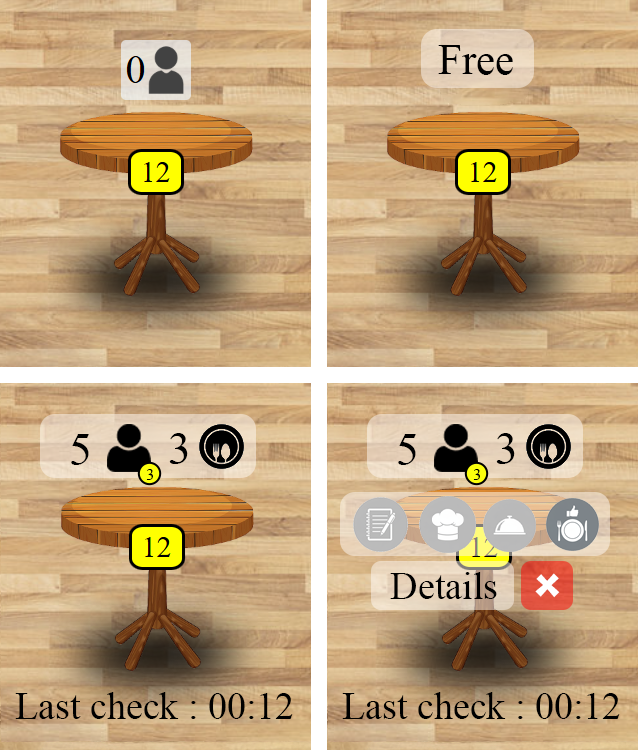
<style>
.page{position:relative;width:638px;height:750px}
.page>*{position:absolute;margin:0}
.t1{font:43px "TimesNewRomanPSMT";color:#000000}
.t2{font:45.8px "TimesNewRomanPSMT";color:#000000}
.t3{font:16px "TimesNewRomanPSMT";color:#000000}
.t4{font:38px "TimesNewRomanPSMT";color:#000000}
.t5{font:50px "SpongeboyMeBob";color:#ffffff;scale:0.95 1}
</style>
<div class="page">
<p class="t1" style="left:438px;top:45px;width:75px;height:30px">Free</p>
<p class="t2" style="left:71px;top:434px;width:18px;height:31px">5</p>
<p class="t2" style="left:169px;top:433px;width:19px;height:31px">3</p>
<p class="t2" style="left:398px;top:434px;width:18px;height:31px">5</p>
<p class="t2" style="left:496px;top:433px;width:19px;height:31px">3</p>
<p class="t3" style="left:146px;top:469px;width:7px;height:11px">3</p>
<p class="t3" style="left:473px;top:469px;width:7px;height:11px">3</p>
<p class="t4" style="left:390px;top:572px;width:107px;height:27px">Details</p>
<p class="t5" style="left:535px;top:573px;width:25px;height:25px;rotate:-45deg">+</p>
<p class="t4" style="left:15px;top:692px;width:278px;height:27px">Last check : 00:12</p>
<p class="t4" style="left:342px;top:692px;width:278px;height:27px">Last check : 00:12</p>
</div>
